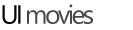
<style>
.page{position:relative;width:133px;height:30px;background:#ffffff}
.page>*{position:absolute;margin:0}
.t1{font:26.4px "NirmalaUI";letter-spacing:-0.1em;color:#474747}
.t2{font:26.4px "NirmalaUI";letter-spacing:-0.1em;color:#060606}
</style>
<div class="page">
<p class="t1" style="left:2px;top:4px;width:91px;height:20px"><span class="t2">UI </span>movies</p>
</div>
